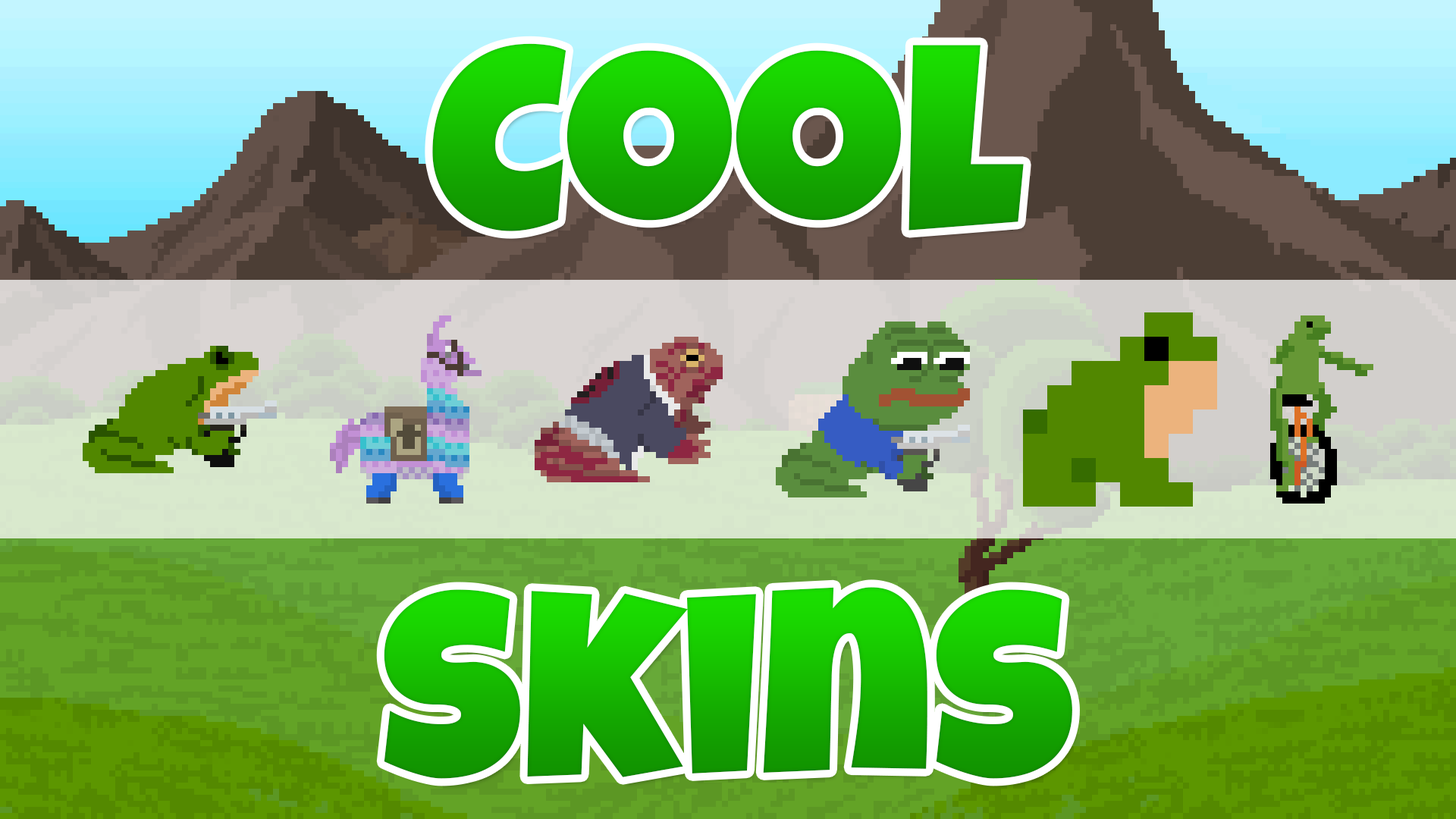
<style>
.page{position:relative;width:1456px;height:819px}
.page>*{position:absolute;margin:0}
.t1{font:265.4px "LuckiestGuy-Regular"}
</style>
<div class="page">
<p class="t1" style="left:432px;top:43px;width:592px;height:188px">Cool</p>
<p class="t1" style="left:384px;top:587px;width:688px;height:192px">skins</p>
</div>
